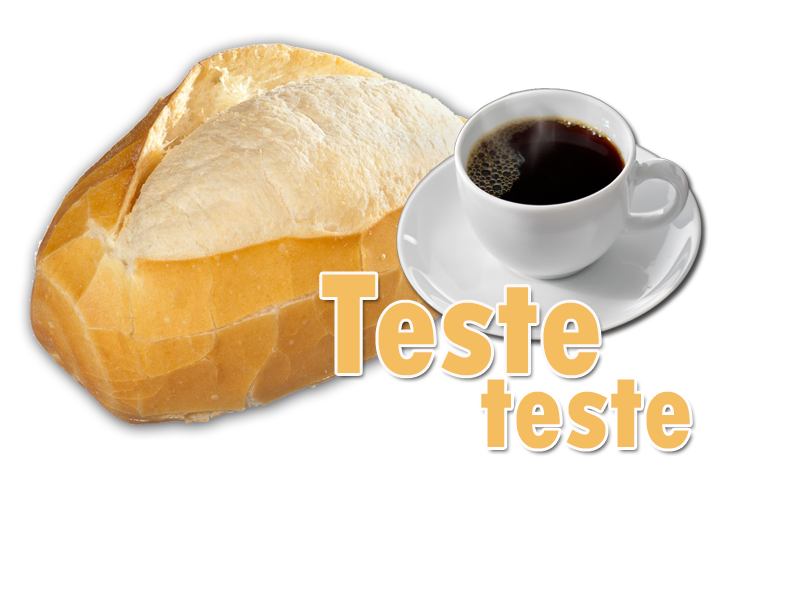
<style>
.page{position:relative;width:800px;height:600px;background:#ffffff}
.page>*{position:absolute;margin:0}
.t1{font:151px "TwCenMT-CondensedExtraBold";color:#f3bd60}
.t2{font:118.7px "TwCenMT-CondensedExtraBold";color:#f3bd60}
</style>
<div class="page">
<p class="t1" style="left:322px;top:274px;width:277px;height:102px">Teste</p>
<p class="t2" style="left:481px;top:379px;width:209px;height:70px">teste</p>
</div>
